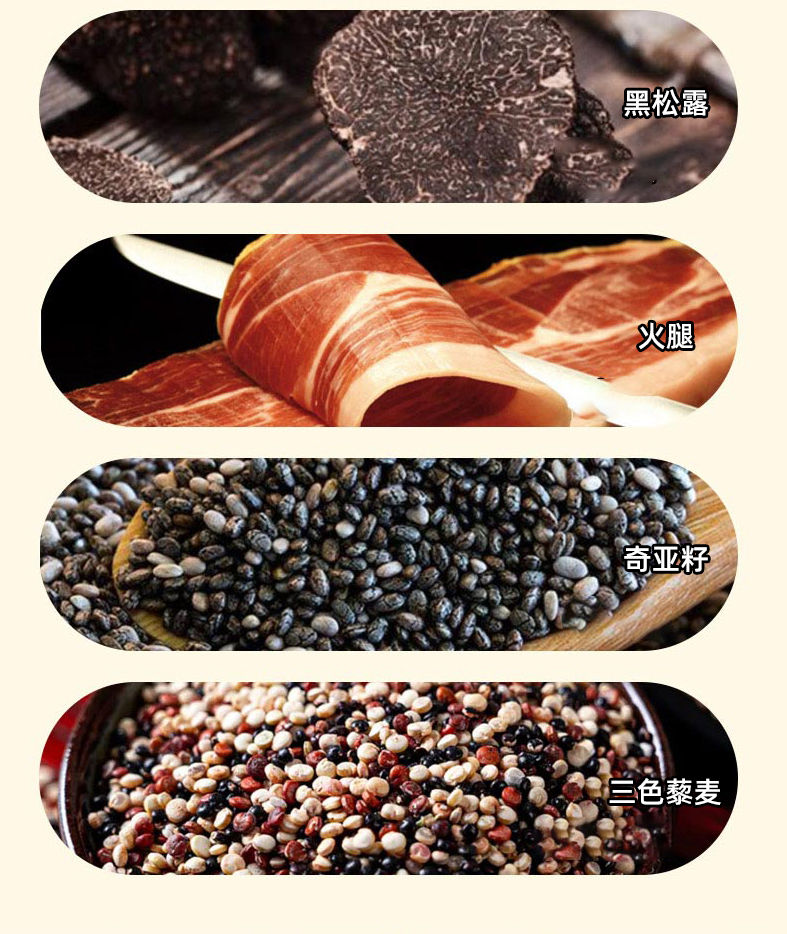
<style>
.page{position:relative;width:787px;height:934px;background:#fff8e6}
.page>*{position:absolute;margin:0}
.t1{font:29px "AlibabaPuHuiTi-Medium";color:#ffffff}
</style>
<div class="page">
<p class="t1" style="left:624px;top:89px;width:84px;height:28px">黑松露</p>
<p class="t1" style="left:639px;top:322px;width:54px;height:28px">火腿</p>
<p class="t1" style="left:624px;top:545px;width:84px;height:27px">奇亚籽</p>
<p class="t1" style="left:609px;top:778px;width:112px;height:28px">三色藜麦</p>
</div>
